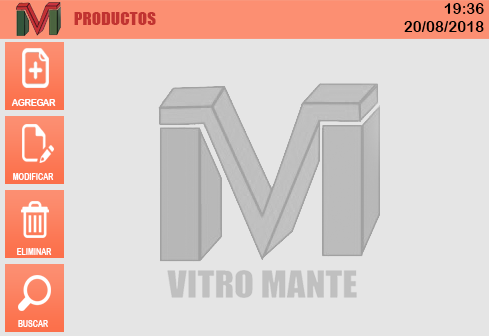
<style>
.page{position:relative;width:489px;height:336px;background:#e5e5e5}
.page>*{position:absolute;margin:0}
.t1{font:14.7px "ArialRoundedMTBold";color:#000000;scale:1.03 1}
.t2{font:17.3px "Impact";color:#c13331}
.t3{font:9.8px "ArialRoundedMTBold";color:#ffffff;scale:0.87 1}
.t4{font:10.2px "ArialRoundedMTBold";color:#ffffff;scale:0.68 1}
</style>
<div class="page">
<p class="t1" style="left:444px;top:3px;width:40px;height:11px">19:36</p>
<p class="t2" style="left:74px;top:12px;width:82px;height:13px">PRODUCTOS</p>
<p class="t1" style="left:404px;top:21px;width:80px;height:11px">20/08/2018</p>
<p class="t3" style="left:11px;top:99px;width:45px;height:7px">AGREGAR</p>
<p class="t4" style="left:13px;top:173px;width:41px;height:7px">MODIFICAR</p>
<p class="t4" style="left:17px;top:248px;width:35px;height:7px">ELIMINAR</p>
<p class="t4" style="left:18px;top:320px;width:30px;height:7px">BUSCAR</p>
</div>
